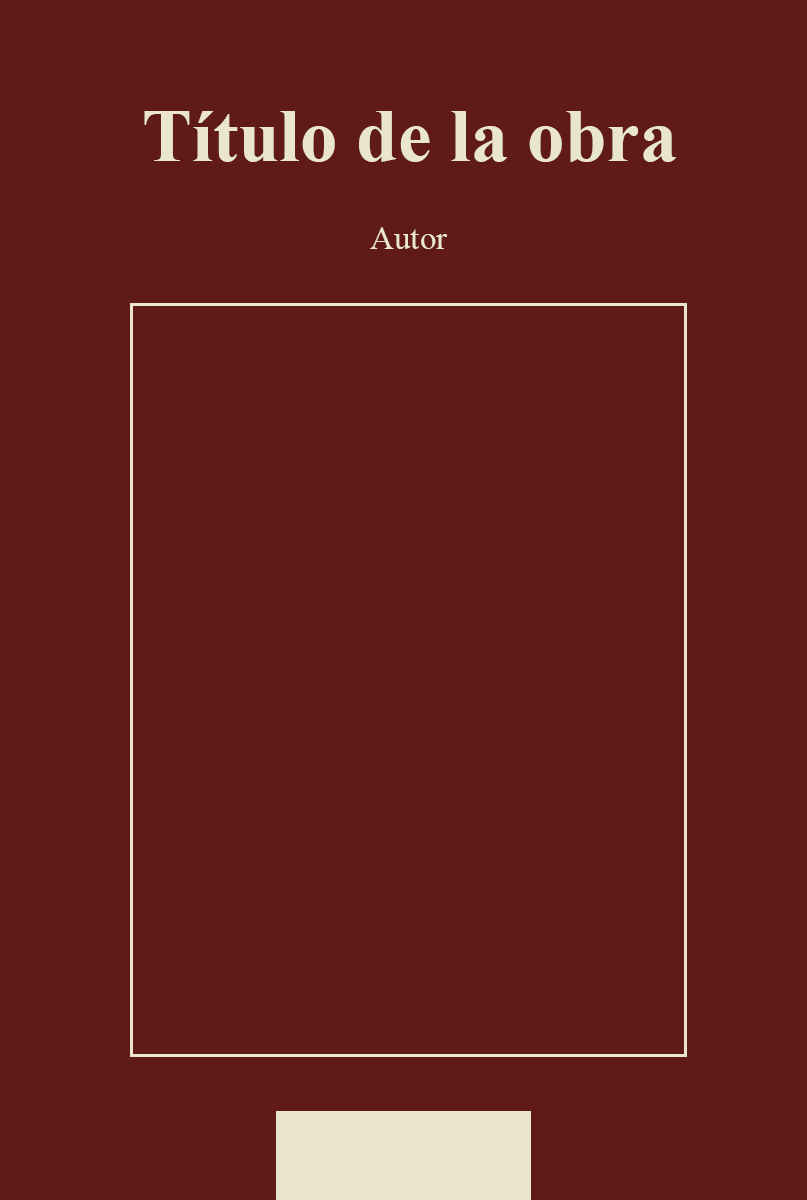
<style>
.page{position:relative;width:807px;height:1200px;background:#611a1a}
.page>*{position:absolute;margin:0}
.t1{font:75px "TimesNewRomanPS-BoldMT";color:#eae5cd}
.t2{font:33.3px "TimesNewRomanPSMT";color:#eae5cd}
</style>
<div class="page">
<p class="t1" style="left:144px;top:111px;width:533px;height:51px">Título de la obra</p>
<p class="t2" style="left:370px;top:227px;width:78px;height:22px">Autor</p>
</div>
